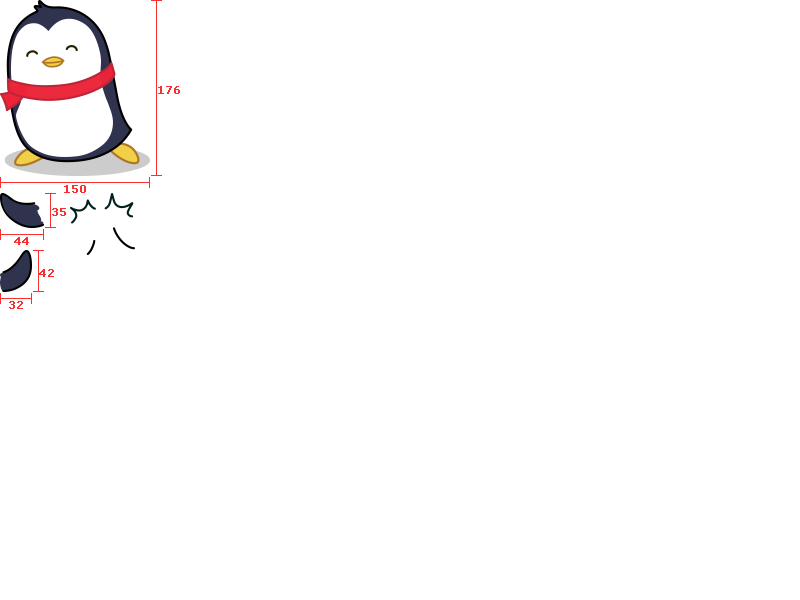
<style>
.page{position:relative;width:800px;height:600px;background:#ffffff}
.page>*{position:absolute;margin:0}
.t1{font:11px "Verdana";color:#f83030;font-weight:bold}
</style>
<div class="page">
<p class="t1" style="left:158px;top:86px;width:22px;height:8px">176</p>
<p class="t1" style="left:64px;top:185px;width:22px;height:8px">150</p>
<p class="t1" style="left:52px;top:208px;width:14px;height:8px">35</p>
<p class="t1" style="left:14px;top:237px;width:15px;height:8px">44</p>
<p class="t1" style="left:39px;top:269px;width:15px;height:8px">42</p>
<p class="t1" style="left:9px;top:301px;width:14px;height:8px">32</p>
</div>
